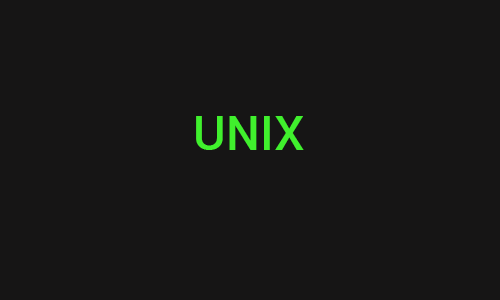
<style>
.page{position:relative;width:500px;height:300px;background:#161515}
.page>*{position:absolute;margin:0}
.t1{font:48px "Roboto-Medium";color:#40f02d}
</style>
<div class="page">
<p class="t1" style="left:196px;top:116px;width:108px;height:34px">UNIX</p>
</div>
